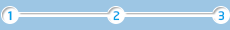
<style>
.page{position:relative;width:230px;height:30px;background:#9dc6e4}
.page>*{position:absolute;margin:0}
.t1{font:14px "LiHeiPro";color:#00a0e9}
</style>
<div class="page">
<p class="t1" style="left:8px;top:11px;width:4px;height:10px">1</p>
<p class="t1" style="left:113px;top:11px;width:7px;height:10px">2</p>
<p class="t1" style="left:218px;top:11px;width:7px;height:10px">3</p>
</div>
